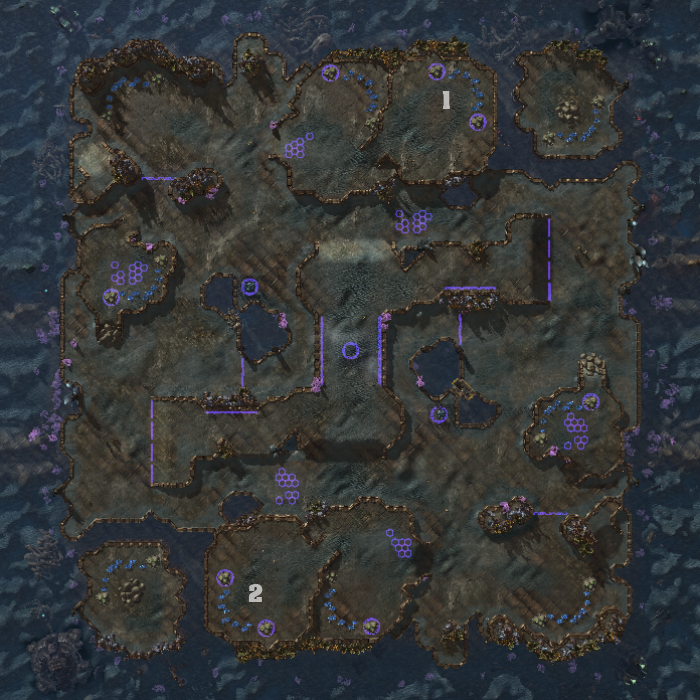
<style>
.page{position:relative;width:700px;height:700px}
.page>*{position:absolute;margin:0}
.t1{font:23px "AcmeFont";color:#bcbbb8}
.t2{font:23px "AcmeFont";color:#babab7}
</style>
<div class="page">
<p class="t1" style="left:442px;top:91px;width:8px;height:18px">1</p>
<p class="t2" style="left:248px;top:584px;width:15px;height:18px">2</p>
</div>
